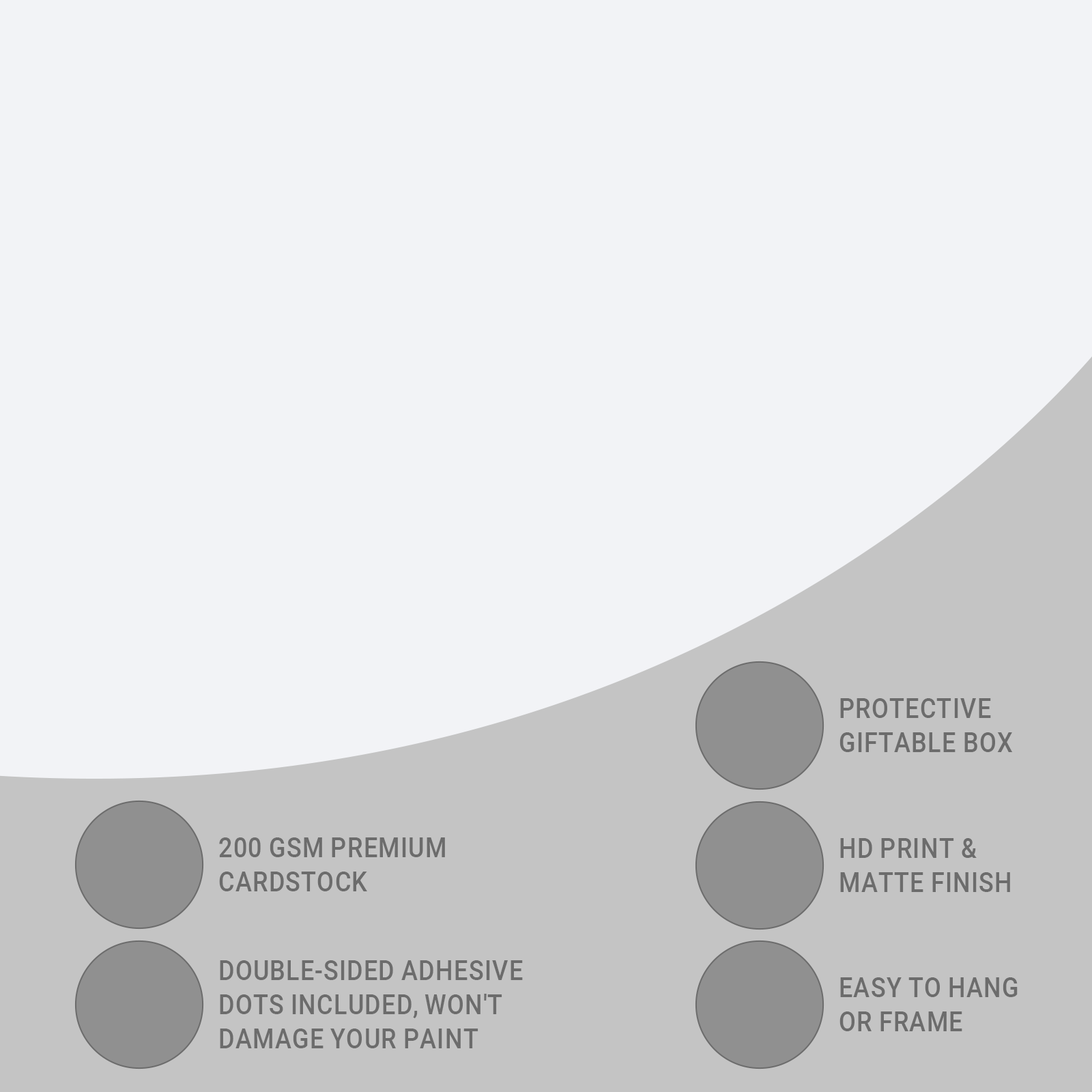
<style>
.page{position:relative;width:1092px;height:1092px;background:#f2f3f6}
.page>*{position:absolute;margin:0}
.t1{font:27.3px/34.1px "Roboto-Medium";color:#6c6c6c;text-transform:uppercase;scale:0.9 1}
</style>
<div class="page">
<p class="t1" style="left:839px;top:698px;width:174px;height:54px">Protective<br>giftable box</p>
<p class="t1" style="left:219px;top:837px;width:226px;height:54px">200 gsm premium<br>cardstock</p>
<p class="t1" style="left:840px;top:838px;width:170px;height:54px">Hd print &amp;<br>matte finish</p>
<p class="t1" style="left:220px;top:960px;width:303px;height:88px">Double-sided adhesive<br>dots included, won't<br>damage your paint</p>
<p class="t1" style="left:839px;top:977px;width:179px;height:54px">Easy to hang<br>or frame</p>
</div>
